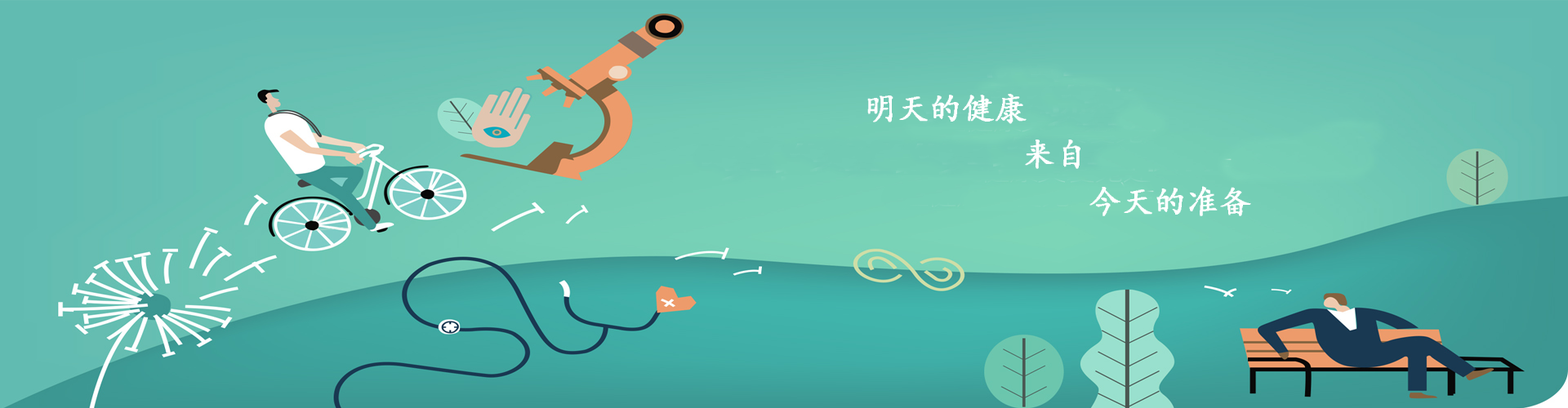
<style>
.page{position:relative;width:1568px;height:408px}
.page>*{position:absolute;margin:0}
.t1{font:32.7px "¿¬Ìå";color:#ffffff;font-weight:bold}
</style>
<div class="page">
<p class="t1" style="left:867px;top:94px;width:160px;height:30px">明天的健康</p>
<p class="t1" style="left:1025px;top:140px;width:55px;height:29px">来自</p>
<p class="t1" style="left:1089px;top:186px;width:162px;height:30px">今天的准备</p>
</div>
